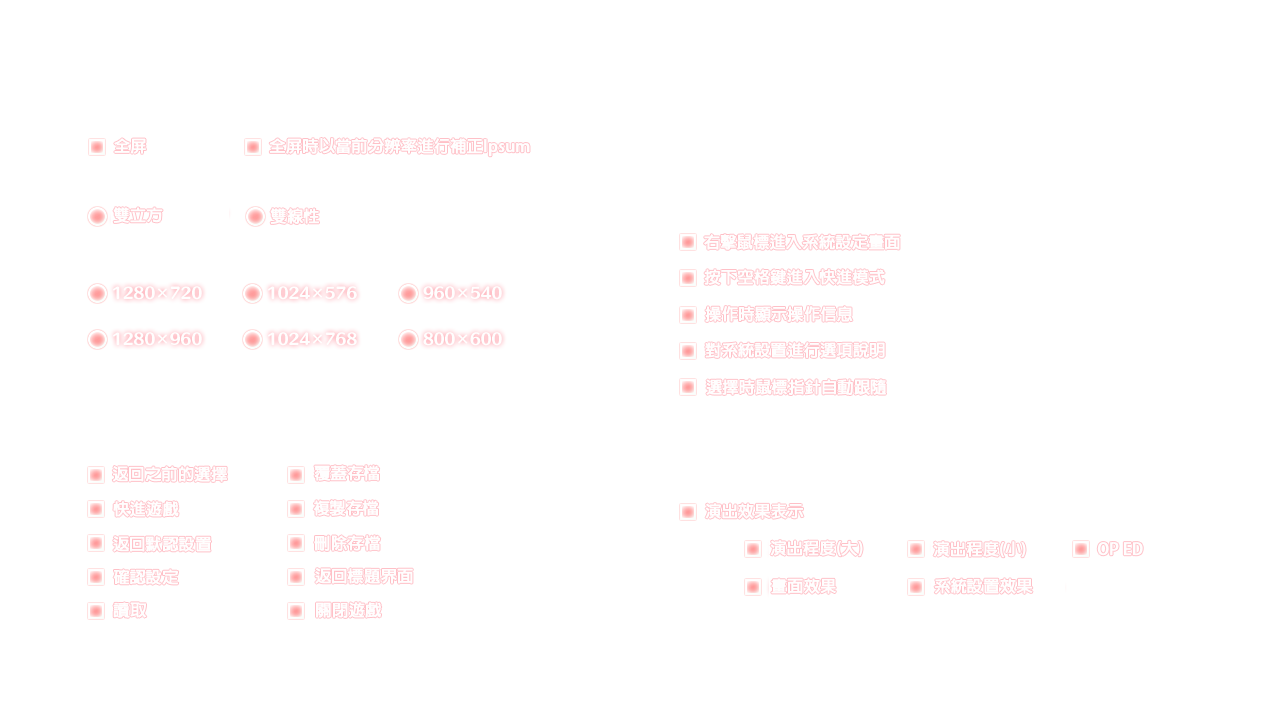
<style>
.page{position:relative;width:1280px;height:720px;background:#ffffff}
.page>*{position:absolute;margin:0}
.t1{font:16px "AdobeFanHeitiStd-Bold";color:#fffefe;font-weight:bold}
</style>
<div class="page">
<p class="t1" style="left:114px;top:138px;width:32px;height:16px">全屏</p>
<p class="t1" style="left:269px;top:138px;width:261px;height:19px">全屏時以當前分辨率進行補正Ipsum</p>
<p class="t1" style="left:113px;top:207px;width:50px;height:16px">雙立方</p>
<p class="t1" style="left:270px;top:208px;width:49px;height:16px">雙線性</p>
<p class="t1" style="left:704px;top:234px;width:196px;height:16px">右擊鼠標進入系統設定畫面</p>
<p class="t1" style="left:704px;top:269px;width:181px;height:16px">按下空格鍵進入快進模式</p>
<p class="t1" style="left:705px;top:306px;width:148px;height:16px">操作時顯示操作信息</p>
<p class="t1" style="left:705px;top:342px;width:180px;height:16px">對系統設置進行選項說明</p>
<p class="t1" style="left:706px;top:379px;width:180px;height:16px">選擇時鼠標指針自動跟隨</p>
<p class="t1" style="left:112px;top:466px;width:115px;height:16px">返回之前的選擇</p>
<p class="t1" style="left:314px;top:465px;width:66px;height:16px">覆蓋存檔</p>
<p class="t1" style="left:113px;top:501px;width:66px;height:16px">快進遊戲</p>
<p class="t1" style="left:313px;top:500px;width:66px;height:16px">複製存檔</p>
<p class="t1" style="left:705px;top:503px;width:99px;height:16px">演出效果表示</p>
<p class="t1" style="left:113px;top:536px;width:98px;height:16px">返回默認設置</p>
<p class="t1" style="left:314px;top:535px;width:67px;height:16px">刪除存檔</p>
<p class="t1" style="left:770px;top:540px;width:93px;height:17px">演出程度(大)</p>
<p class="t1" style="left:933px;top:541px;width:93px;height:17px">演出程度(小)</p>
<p class="t1" style="left:1097px;top:542px;width:46px;height:14px">OP ED</p>
<p class="t1" style="left:113px;top:569px;width:66px;height:16px">確認設定</p>
<p class="t1" style="left:315px;top:568px;width:98px;height:16px">返回標題界面</p>
<p class="t1" style="left:771px;top:578px;width:65px;height:16px">畫面效果</p>
<p class="t1" style="left:934px;top:578px;width:99px;height:16px">系統設置效果</p>
<p class="t1" style="left:113px;top:602px;width:34px;height:16px">讀取</p>
<p class="t1" style="left:316px;top:602px;width:66px;height:16px">關閉遊戲</p>
</div>
